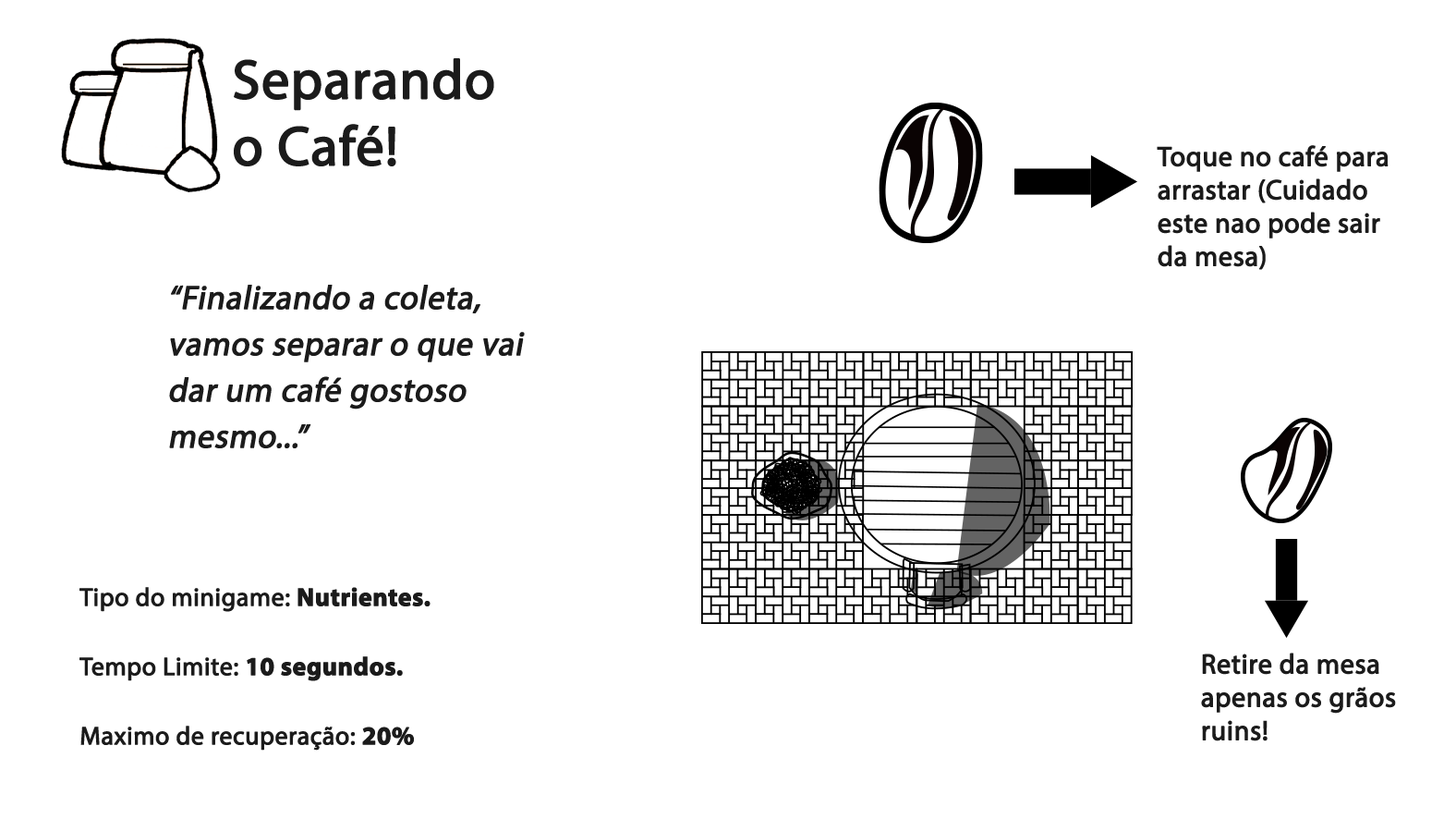
<style>
.page{position:relative;width:1456px;height:819px;background:#ffffff}
.page>*{position:absolute;margin:0}
.t1{font:55.4px "MyriadPro-Regular";color:#1b1b1b;font-weight:bold}
.t2{font:27.7px "MyriadPro-Regular";color:#1b1b1b;font-weight:bold}
.t3{font:33.3px/46.2px "MyriadPro-Regular";color:#1b1b1b;font-weight:bold;font-style:italic}
.t4{font:25.5px/69.3px "MyriadPro-Regular";color:#1b1b1b;font-weight:bold}
.t5{font:25.5px/69.3px "MyriadPro-Bold";color:#1b1b1b;font-weight:bold}
</style>
<div class="page">
<p class="t1" style="left:234px;top:58px;width:260px;height:108px">Separando<br>o Café!</p>
<p class="t2" style="left:1157px;top:145px;width:232px;height:125px">Toque no café para<br>arrastar (Cuidado <br>este nao pode sair<br>da mesa)</p>
<p class="t3" style="left:169px;top:285px;width:356px;height:163px">“Finalizando a coleta, vamos separar o que vai dar um café gostoso mesmo...”</p>
<p class="t4" style="left:79px;top:587px;width:352px;height:163px">Tipo do minigame:<span class="t5"> Nutrientes.<br></span>Tempo Limite: <span class="t5">10 segundos.<br></span>Maximo de recuperação: <span class="t5">20%</span></p>
<p class="t2" style="left:1201px;top:652px;width:195px;height:89px">Retire da mesa <br>apenas os grãos<br>ruins!</p>
</div>
